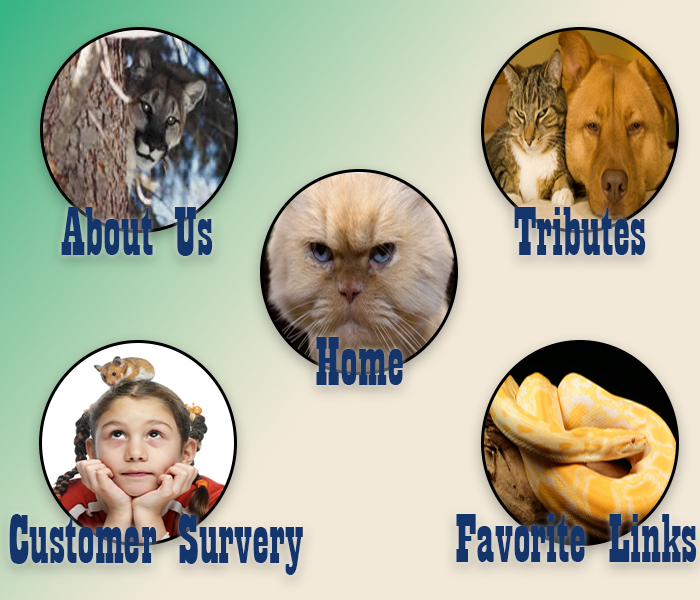
<style>
.page{position:relative;width:700px;height:600px}
.page>*{position:absolute;margin:0}
.t1{font:72px "Playbill";color:#14356b}
</style>
<div class="page">
<p class="t1" style="left:61px;top:207px;width:152px;height:49px">About Us</p>
<p class="t1" style="left:514px;top:207px;width:132px;height:48px">Tributes</p>
<p class="t1" style="left:316px;top:337px;width:87px;height:48px">Home</p>
<p class="t1" style="left:9px;top:514px;width:294px;height:61px">Customer Survery</p>
<p class="t1" style="left:456px;top:514px;width:241px;height:48px">Favorite Links</p>
</div>
